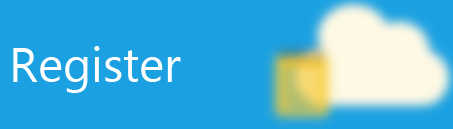
<style>
.page{position:relative;width:453px;height:129px;background:#1ba1e2}
.page>*{position:absolute;margin:0}
.t1{font:48px "SegoeUI";color:#ffffff}
</style>
<div class="page">
<p class="t1" style="left:13px;top:46px;width:168px;height:47px">Register</p>
</div>
